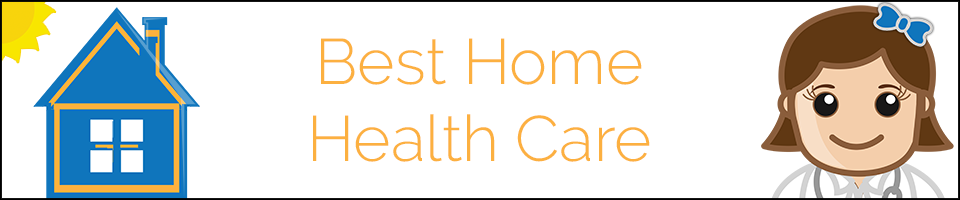
<style>
.page{position:relative;width:960px;height:200px;background:#ffffff}
.page>*{position:absolute;margin:0}
.t1{font:64px "Raleway-Light";color:#fcb040}
</style>
<div class="page">
<p class="t1" style="left:313px;top:38px;width:337px;height:124px;text-align:center">Best Home<br>Health Care</p>
</div>
